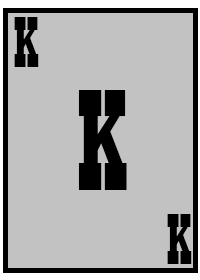
<style>
.page{position:relative;width:200px;height:280px;background:#c2c2c2}
.page>*{position:absolute;margin:0}
.t1{font:75px "Playbill";letter-spacing:-0.1em;color:#000000}
.t2{font:150px "Playbill";letter-spacing:-0.1em;color:#000000}
</style>
<div class="page">
<p class="t1" style="left:14px;top:17px;width:25px;height:50px">K</p>
<p class="t2" style="left:78px;top:90px;width:49px;height:100px">K</p>
<p class="t1" style="left:167px;top:214px;width:25px;height:50px">K</p>
</div>
